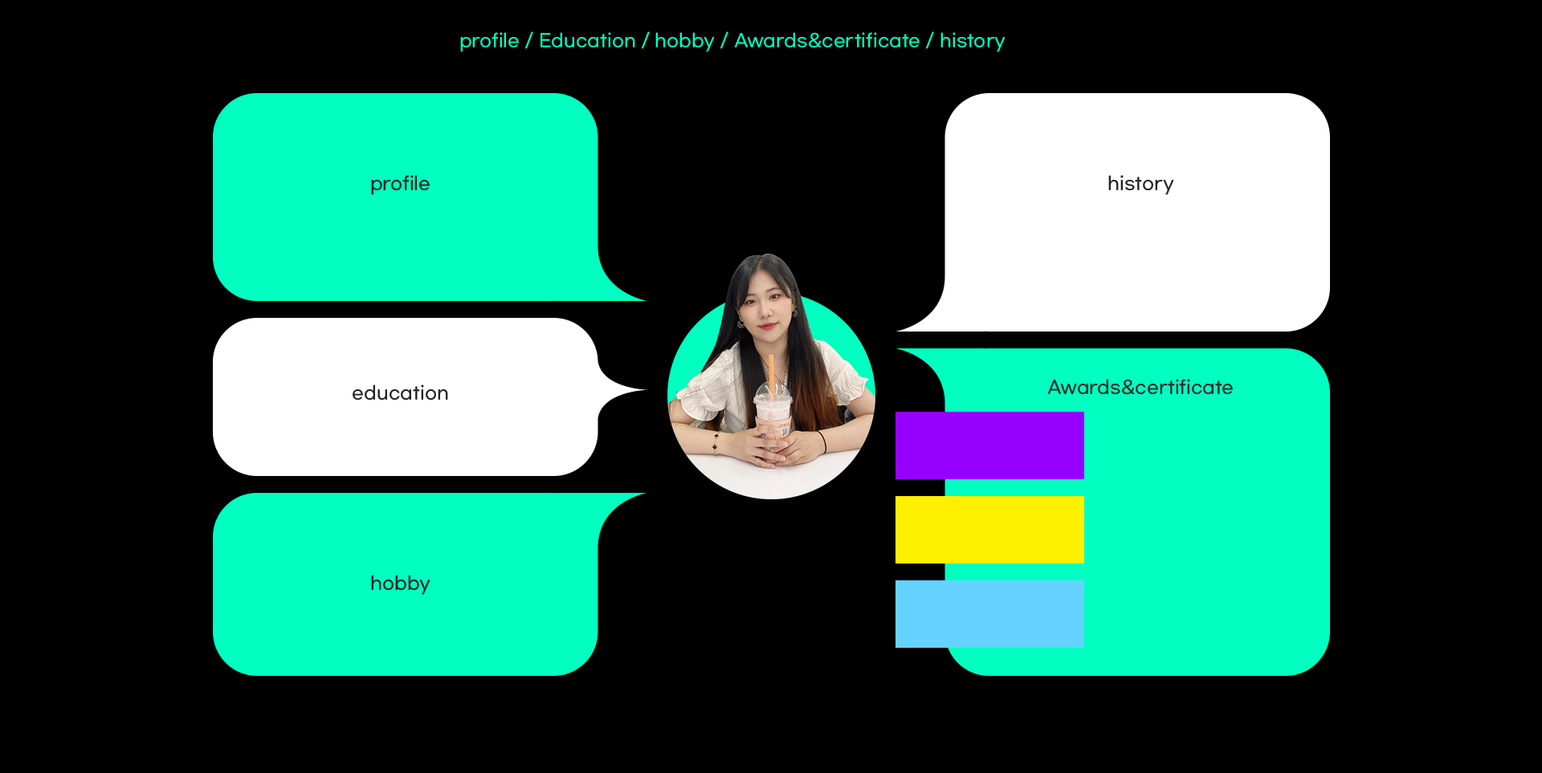
<style>
.page{position:relative;width:1542px;height:773px;background:#000000}
.page>*{position:absolute;margin:0}
.t1{font:17.6px "GmarketSansMedium";color:#00ffc0}
.t2{font:17.6px "GmarketSansMedium";color:#242424}
.t3{font:17.6px "GmarketSansMedium";color:#2b2b2b}
</style>
<div class="page">
<p class="t1" style="left:460px;top:31px;width:545px;height:21px">profile / Education / hobby / Awards&amp;certificate / history</p>
<p class="t2" style="left:371px;top:175px;width:59px;height:20px">profile</p>
<p class="t2" style="left:1108px;top:175px;width:66px;height:20px">history</p>
<p class="t2" style="left:353px;top:385px;width:95px;height:16px">education</p>
<p class="t3" style="left:1047px;top:379px;width:186px;height:16px">Awards&amp;certificate</p>
<p class="t2" style="left:371px;top:575px;width:59px;height:20px">hobby</p>
</div>
